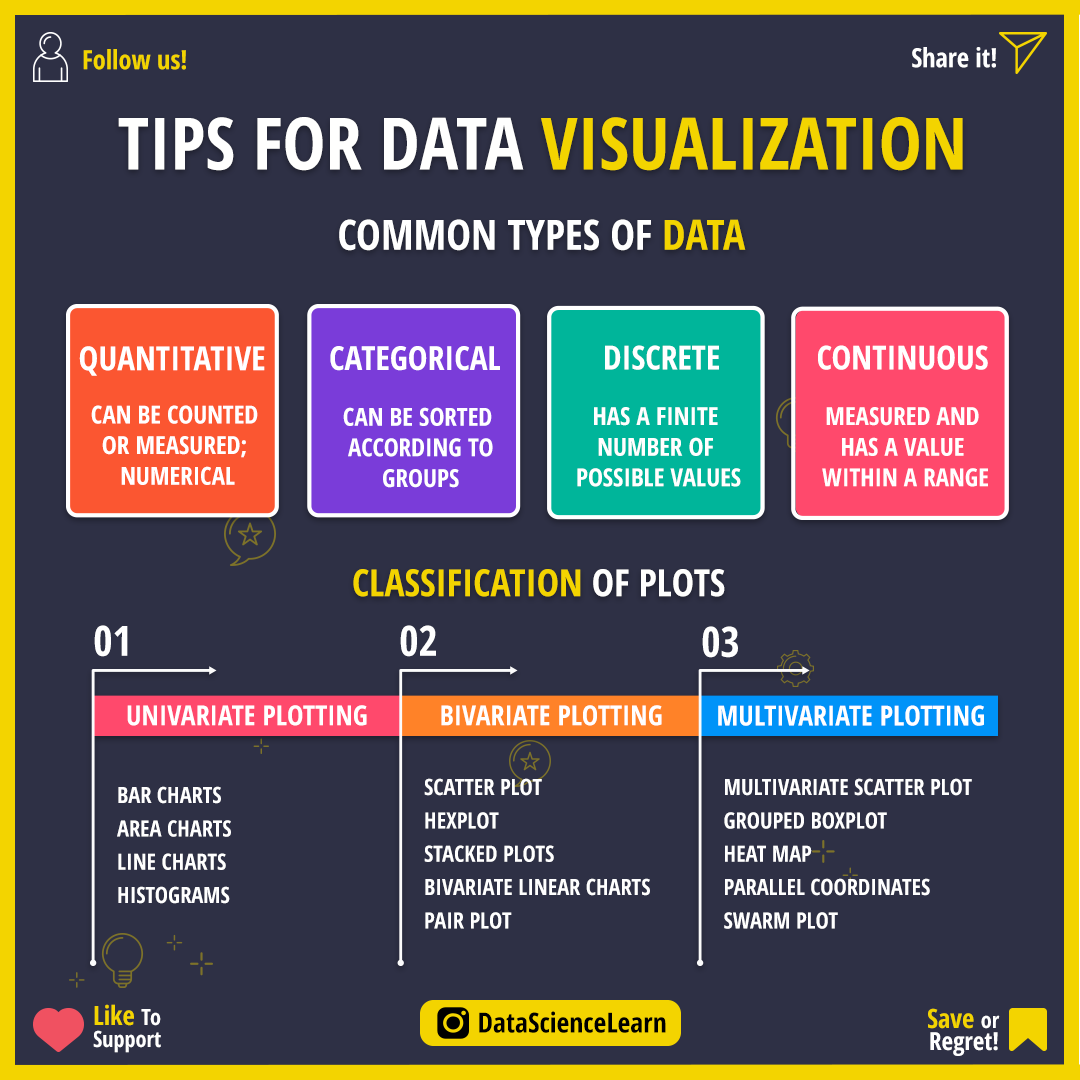
<style>
.page{position:relative;width:1080px;height:1080px;background:#2e3045}
.page>*{position:absolute;margin:0}
.t1{font:26.4px "OpenSans-CondensedBold";color:#f3d400}
.t2{font:26.4px "OpenSans-CondensedBold";color:#ffffff}
.t3{font:72.2px "OpenSans-CondensedBold";color:#fffffe}
.t4{font:72.2px "OpenSans-CondensedBold";color:#f3d400}
.t5{font:41.7px "OpenSans-CondensedBold";color:#ffffff}
.t6{font:41.7px "OpenSans-CondensedBold";color:#f3d400}
.t7{font:33.3px "OpenSans-CondensedBold";color:#ffffff}
.t8{font:25px/30.6px "OpenSans-CondensedBold";color:#ffffff}
.t9{font:37.5px "OpenSans-CondensedBold";color:#f3d400}
.t10{font:37.5px "OpenSans-CondensedBold";color:#fffffe}
.t11{font:27.8px "OpenSans-CondensedBold";color:#ffffff}
.t12{font:22.2px/33.3px "OpenSans-CondensedBold";color:#ffffff}
.t13{font:22.2px/22.2px "OpenSans-CondensedBold";color:#ffffff}
.t14{font:26.4px/22.2px "OpenSans-CondensedBold";color:#f3d400}
.t15{font:27.8px "OpenSans-CondensedBold";color:#000000}
.t16{font:25px/22.2px "OpenSans-CondensedBold";color:#ffffff}
</style>
<div class="page">
<p class="t1" style="left:83px;top:49px;width:103px;height:21px">Follow us!</p>
<p class="t2" style="left:912px;top:47px;width:84px;height:21px">Share it!</p>
<p class="t3" style="left:118px;top:117px;width:845px;height:54px">TIPS FOR DATA <span class="t4">VISUALIZATION</span></p>
<p class="t5" style="left:339px;top:219px;width:407px;height:32px">COMMON TYPES OF <span class="t6">DATA</span></p>
<p class="t7" style="left:79px;top:346px;width:186px;height:30px">QUANTITATIVE</p>
<p class="t7" style="left:330px;top:346px;width:170px;height:25px">CATEGORICAL</p>
<p class="t7" style="left:605px;top:345px;width:114px;height:25px">DISCRETE</p>
<p class="t7" style="left:818px;top:345px;width:170px;height:25px">CONTINUOUS</p>
<p class="t8" style="left:91px;top:405px;width:167px;height:80px;text-align:center">CAN BE COUNTED <br>OR MEASURED; <br>NUMERICAL</p>
<p class="t8" style="left:343px;top:407px;width:150px;height:81px;text-align:center">CAN BE SORTED <br>ACCORDING TO<br>GROUPS</p>
<p class="t8" style="left:577px;top:407px;width:164px;height:80px;text-align:center">HAS A FINITE <br>NUMBER OF <br>POSSIBLE VALUES</p>
<p class="t8" style="left:822px;top:407px;width:166px;height:80px;text-align:center">MEASURED AND <br>HAS A VALUE <br>WITHIN A RANGE</p>
<p class="t9" style="left:353px;top:569px;width:372px;height:28px">CLASSIFICATION <span class="t10">OF PLOTS</span></p>
<p class="t5" style="left:94px;top:625px;width:34px;height:32px">01</p>
<p class="t5" style="left:400px;top:625px;width:36px;height:32px">02</p>
<p class="t5" style="left:702px;top:626px;width:36px;height:32px">03</p>
<p class="t11" style="left:127px;top:705px;width:240px;height:21px">UNIVARIATE PLOTTING</p>
<p class="t11" style="left:441px;top:705px;width:221px;height:21px">BIVARIATE PLOTTING</p>
<p class="t11" style="left:718px;top:705px;width:266px;height:21px">MULTIVARIATE PLOTTING</p>
<p class="t12" style="left:424px;top:778px;width:226px;height:151px">SCATTER PLOT<br>HEXPLOT<br>STACKED PLOTS<br>BIVARIATE LINEAR CHARTS<br>PAIR PLOT</p>
<p class="t12" style="left:724px;top:778px;width:248px;height:151px">MULTIVARIATE SCATTER PLOT<br>GROUPED BOXPLOT<br>HEAT MAP<br>PARALLEL COORDINATES<br>SWARM PLOT</p>
<p class="t12" style="left:117px;top:786px;width:114px;height:118px">BAR CHARTS<br>AREA CHARTS<br>LINE CHARTS<br>HISTOGRAMS</p>
<p class="t13" style="left:93px;top:1004px;width:68px;height:49px"><span class="t14">Like </span>To<br>Support</p>
<p class="t15" style="left:479px;top:1011px;width:187px;height:22px">DataScienceLearn</p>
<p class="t16" style="left:928px;top:1008px;width:72px;height:48px;text-align:right"><span class="t14">Save </span><span class="t13">or<br></span>Regret!</p>
</div>
